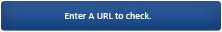
<style>
.page{position:relative;width:222px;height:32px}
.page>*{position:absolute;margin:0}
.t1{font:10px "Calibri";color:#ffffff}
</style>
<div class="page">
<p class="t1" style="left:65px;top:12px;width:86px;height:7px">Enter A URL to check.</p>
</div>
